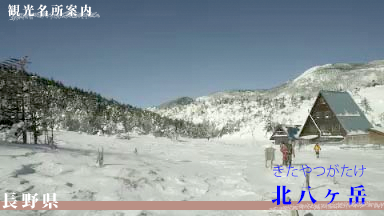
<style>
.page{position:relative;width:384px;height:216px}
.page>*{position:absolute;margin:0}
.t1{font:12px "KozMinPr6N-Heavy";letter-spacing:0.2em;color:#ffffff}
.t2{font:13.6px "KozGoPro-Light"}
.t3{font:21px "KozMinPr6N-Heavy";letter-spacing:0.2em;color:#0000ff}
.t4{font:17px "KozMinPr6N-Heavy";letter-spacing:0.2em;color:#ffffff}
</style>
<div class="page">
<p class="t1" style="left:8px;top:4px;width:84px;height:13px">観光名所案内</p>
<p class="t2" style="left:273px;top:164px;width:93px;height:13px">きたやつがたけ</p>
<p class="t3" style="left:271px;top:184px;width:96px;height:21px">北八ヶ岳</p>
<p class="t4" style="left:1px;top:192px;width:58px;height:17px">長野県</p>
</div>
